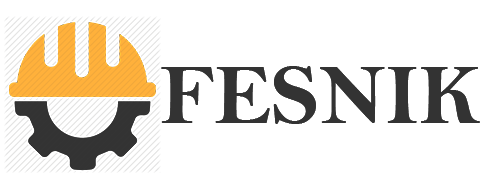
<style>
.page{position:relative;width:480px;height:189px;background:#ffffff}
.page>*{position:absolute;margin:0}
.t1{font:87.6px "BellMTBold";color:#333333}
</style>
<div class="page">
<p class="t1" style="left:161px;top:66px;width:319px;height:58px">FESNIK</p>
</div>
